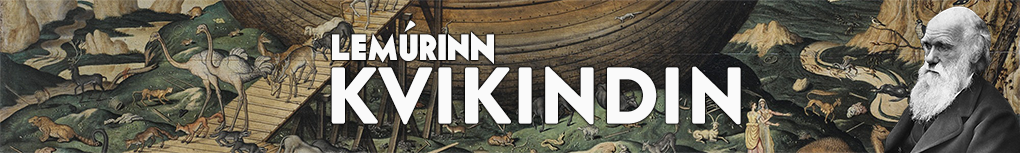
<style>
.page{position:relative;width:1020px;height:153px}
.page>*{position:absolute;margin:0}
.t1{font:36px "Geomancy-ExtraBold";color:#fafafa}
.t2{font:80px "BrandonGrotesque-Black";color:#fafafa}
</style>
<div class="page">
<p class="t1" style="left:332px;top:20px;width:162px;height:44px">leMÚrInN</p>
<p class="t2" style="left:331px;top:66px;width:410px;height:59px">KVIKINDIN</p>
</div>
